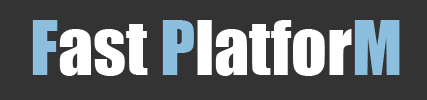
<style>
.page{position:relative;width:427px;height:100px;background:#333333}
.page>*{position:absolute;margin:0}
.t1{font:70px "Impact";color:#ffffff}
.t2{font:70px "Impact";color:#8cbfde}
</style>
<div class="page">
<p class="t1" style="left:32px;top:20px;width:368px;height:56px"><span class="t2">F</span>ast <span class="t2">P</span>latfor<span class="t2">M</span></p>
</div>
